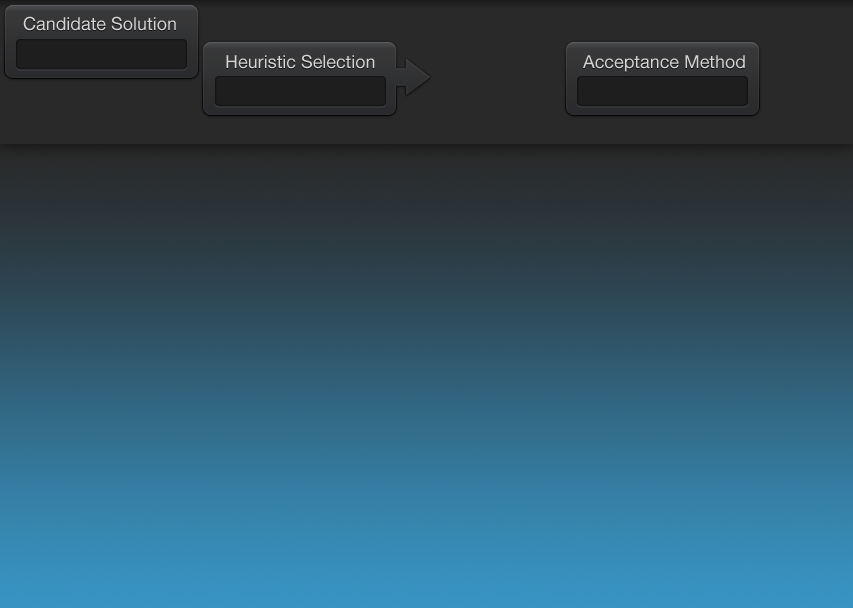
<style>
.page{position:relative;width:853px;height:608px}
.page>*{position:absolute;margin:0}
.t1{font:18px "HelveticaNeue";color:#d5d5d5}
</style>
<div class="page">
<p class="t1" style="left:23px;top:16px;width:153px;height:15px">Candidate Solution</p>
<p class="t1" style="left:226px;top:54px;width:149px;height:15px">Heuristic Selection</p>
<p class="t1" style="left:583px;top:55px;width:162px;height:17px">Acceptance Method</p>
</div>
